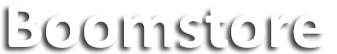
<style>
.page{position:relative;width:337px;height:54px;background:#ffffff}
.page>*{position:absolute;margin:0}
.t1{font:65.9px "Calibri-Bold";color:#ffffff;scale:1.07 1}
</style>
<div class="page">
<p class="t1" style="left:8px;top:5px;width:317px;height:43px">Boomstore</p>
</div>
